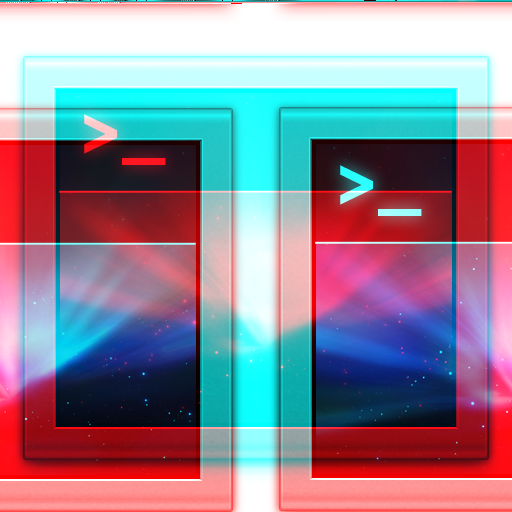
<style>
.page{position:relative;width:512px;height:512px}
.page>*{position:absolute;margin:0}
.t1{font:72px "EspressoMono-Bold"}
</style>
<div class="page">
<p class="t1" style="left:84px;top:112px;width:82px;height:51px">&gt;_</p>
</div>
